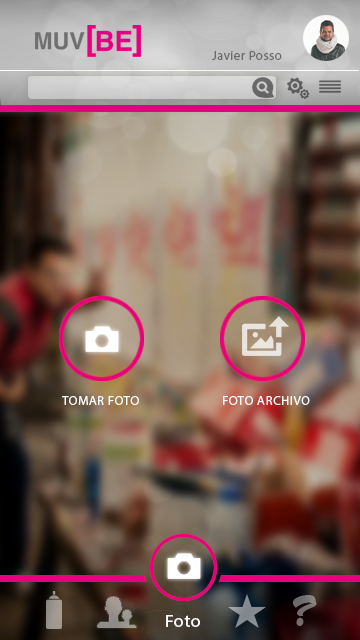
<style>
.page{position:relative;width:360px;height:640px}
.page>*{position:absolute;margin:0}
.t1{font:13px "MyriadPro-Regular";letter-spacing:0.035em;color:#6a6a6a}
.t2{font:13px "MyriadPro-Regular";letter-spacing:0.035em;color:#fdfdfe;text-transform:uppercase}
.t3{font:35.4px "CandyScript";letter-spacing:0.035em;color:#736c6c}
.t4{font:17.5px "MyriadPro-Regular";letter-spacing:0.035em;color:#ffffff;scale:1.03 1}
</style>
<div class="page">
<p class="t1" style="left:212px;top:51px;width:70px;height:9px">Javier Posso</p>
<p class="t2" style="left:62px;top:396px;width:77px;height:9px">tomar foto</p>
<p class="t2" style="left:223px;top:396px;width:87px;height:9px">foto archivo</p>
<p class="t3" style="left:292px;top:595px;width:25px;height:31px">?</p>
<p class="t4" style="left:166px;top:615px;width:34px;height:12px">Foto</p>
</div>
